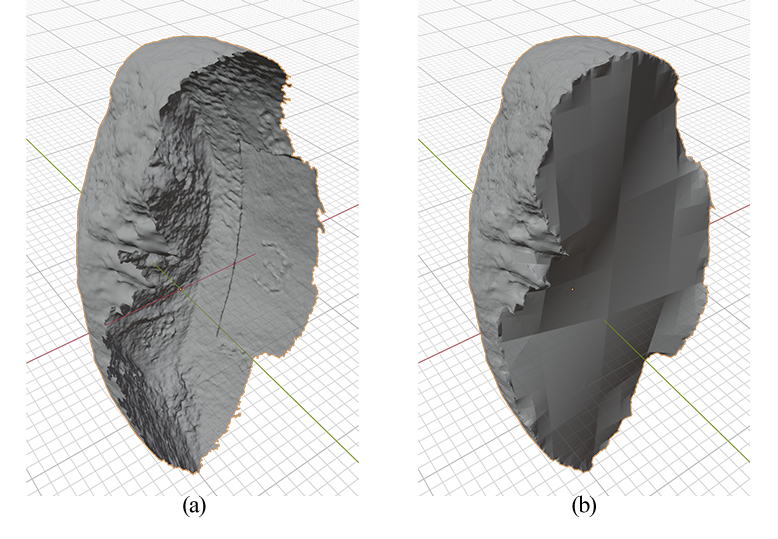
<style>
.page{position:relative;width:778px;height:539px;background:#ffffff}
.page>*{position:absolute;margin:0}
.t1{font:24px "TimesNewRomanPSMT";letter-spacing:-0.05em;color:#000000}
</style>
<div class="page">
<p class="t1" style="left:183px;top:495px;width:23px;height:23px">(a)</p>
<p class="t1" style="left:572px;top:495px;width:24px;height:23px">(b)</p>
</div>
